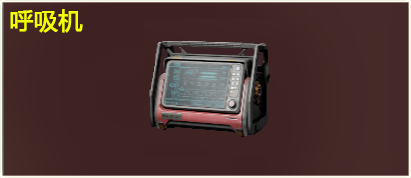
<style>
.page{position:relative;width:411px;height:178px}
.page>*{position:absolute;margin:0}
.t1{font:24px "MicrosoftYaHeiUI";color:#f4ff00;font-weight:bold}
</style>
<div class="page">
<p class="t1" style="left:10px;top:9px;width:73px;height:24px">呼吸机</p>
</div>
